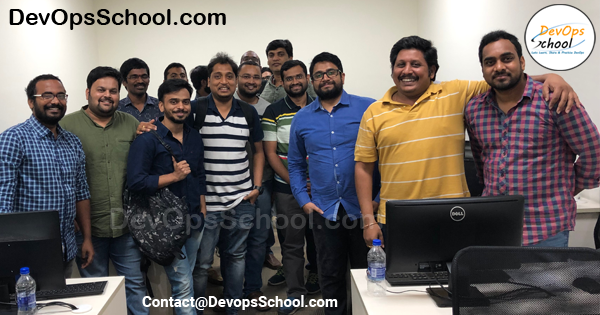
<style>
.page{position:relative;width:600px;height:315px}
.page>*{position:absolute;margin:0}
.t1{font:23px "ArialRoundedMTBold";color:#000000}
.t2{font:29px "ArialRoundedMTBold"}
.t3{font:15px "Roboto-Bold";color:#ffffff}
</style>
<div class="page">
<p class="t1" style="left:9px;top:9px;width:217px;height:21px">DevOpsSchool.com</p>
<p class="t2" style="left:110px;top:208px;width:273px;height:27px">DevOpsSchool.com</p>
<p class="t3" style="left:142px;top:295px;width:196px;height:15px">Contact@DevopsSchool.com</p>
</div>
